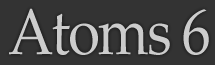
<style>
.page{position:relative;width:215px;height:65px;background:#333333}
.page>*{position:absolute;margin:0}
.t1{font:65px "PalatinoLinotype-Roman";letter-spacing:-0.04em;color:#cccccc;scale:0.9 1}
</style>
<div class="page">
<p class="t1" style="left:9px;top:8px;width:200px;height:47px">Atoms 6</p>
</div>
